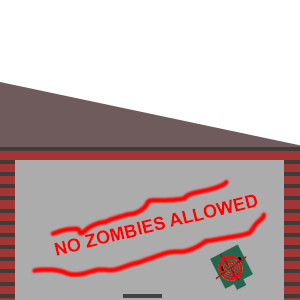
<style>
.page{position:relative;width:300px;height:300px;background:#ffffff}
.page>*{position:absolute;margin:0}
.t1{font:18px "Arial-BoldMT";color:#ff0000}
</style>
<div class="page">
<p class="t1" style="left:54px;top:194px;width:203px;height:62px;rotate:-14deg">NO ZOMBIES ALLOWED</p>
</div>
